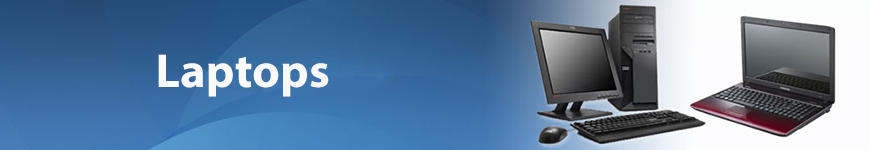
<style>
.page{position:relative;width:870px;height:150px}
.page>*{position:absolute;margin:0}
.t1{font:48px "MyriadPro-Bold";letter-spacing:0.003em;color:#fafafa}
</style>
<div class="page">
<p class="t1" style="left:158px;top:54px;width:171px;height:43px">Laptops</p>
</div>
